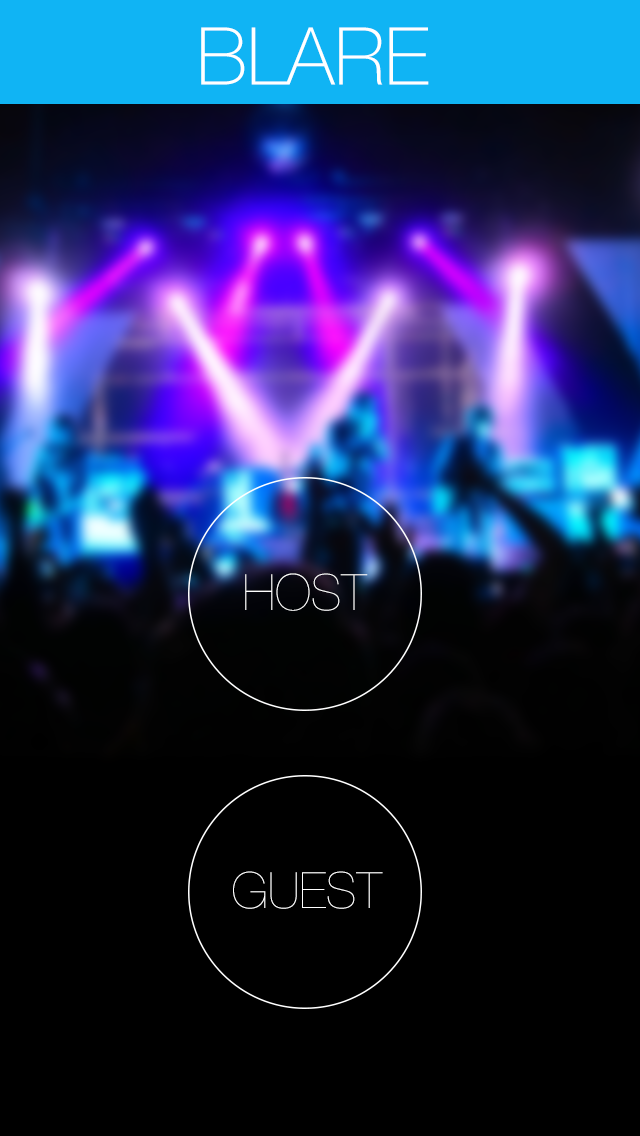
<style>
.page{position:relative;width:640px;height:1136px;background:#000000}
.page>*{position:absolute;margin:0}
.t1{font:80px "HelveticaNeue-Thin";color:#ffffff}
.t2{font:50px "HelveticaNeue-UltraLight";color:#ffffff}
</style>
<div class="page">
<p class="t1" style="left:201px;top:27px;width:228px;height:58px">BLARE</p>
<p class="t2" style="left:245px;top:573px;width:123px;height:38px">HOST</p>
<p class="t2" style="left:233px;top:871px;width:150px;height:38px">GUEST</p>
</div>
